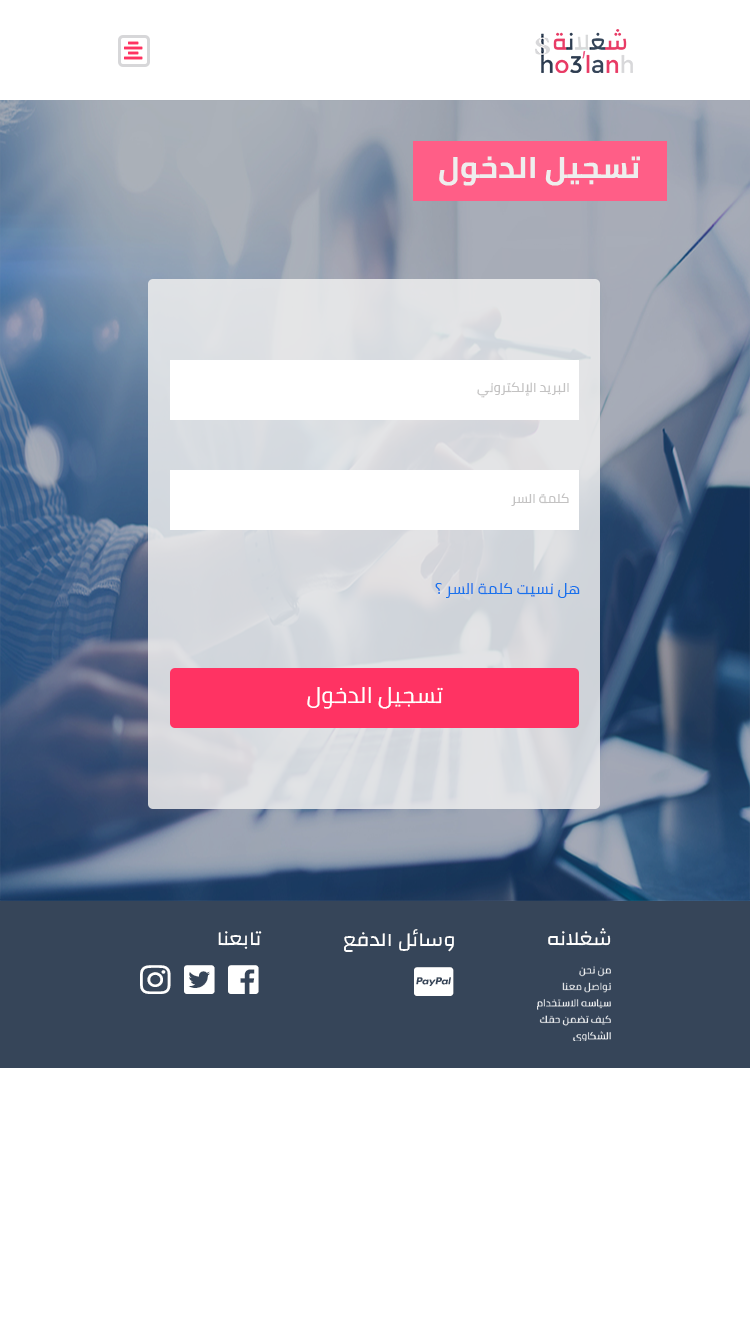
<style>
.page{position:relative;width:750px;height:1334px;background:#ffffff}
.page>*{position:absolute;margin:0}
.t1{font:30px "Cairo-Bold";color:#eeeeee;text-transform:uppercase;scale:1.06 1}
.t2{font:13px "Cairo";color:#c3c2c2;text-transform:uppercase;scale:1.06 1}
.t3{font:15px "Cairo";color:#1772ec;text-transform:uppercase;scale:1.06 1}
.t4{font:22px "Cairo";color:#ffffff;text-transform:uppercase;scale:1.06 1}
.t5{font:19.7px "Changa-Regular";color:#ffffff;text-transform:uppercase;scale:1.06 1}
.t6{font:9.9px/16.4px "Cairo-Regular";color:#ffffff;text-transform:uppercase;scale:1.06 1}
</style>
<div class="page">
<p class="t1" style="left:439px;top:156px;width:201px;height:30px">تسجيل الدخول</p>
<p class="t2" style="left:477px;top:382px;width:92px;height:16px">البريد الإلكتروني</p>
<p class="t2" style="left:511px;top:493px;width:58px;height:13px">كلمة السر</p>
<p class="t3" style="left:435px;top:583px;width:145px;height:15px">هل نسيت كلمة السر ؟</p>
<p class="t4" style="left:307px;top:687px;width:136px;height:22px">تسجيل الدخول</p>
<p class="t5" style="left:344px;top:929px;width:110px;height:23px">وسائل الدفع</p>
<p class="t5" style="left:548px;top:928px;width:63px;height:18px">شغلانه</p>
<p class="t5" style="left:218px;top:931px;width:44px;height:18px">تابعنا</p>
<p class="t6" style="left:537px;top:966px;width:74px;height:75px">من نحن<br>تواصل معنا<br>سياسه الاستخدام <br>كيف تضمن حقك<br>الشكاوى</p>
</div>
